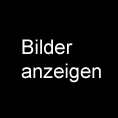
<style>
.page{position:relative;width:118px;height:118px;background:#000000}
.page>*{position:absolute;margin:0}
.t1{font:20px "ArialMT";color:#ffffff}
</style>
<div class="page">
<p class="t1" style="left:21px;top:39px;width:80px;height:44px">Bilder<br>anzeigen</p>
</div>
